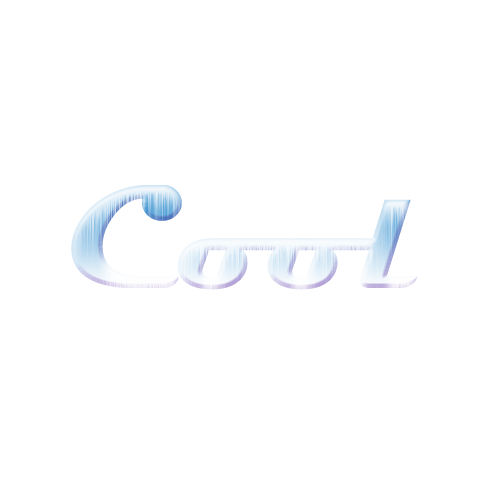
<style>
.page{position:relative;width:500px;height:500px;background:#ffffff}
.page>*{position:absolute;margin:0}
.t1{font:150px "Magneto-Bold";letter-spacing:0.02em}
</style>
<div class="page">
<p class="t1" style="left:71px;top:185px;width:347px;height:105px">Cool</p>
</div>
